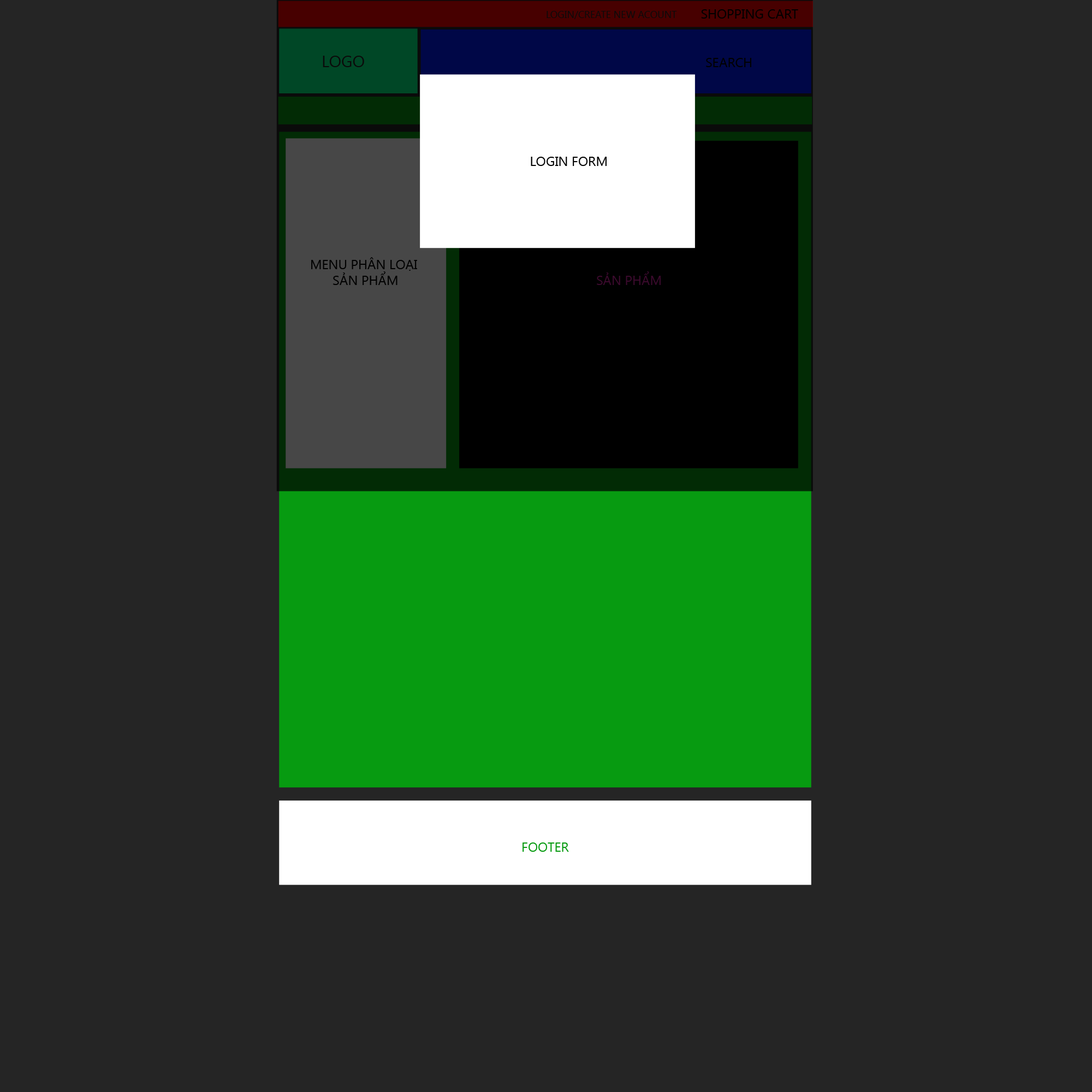
<style>
.page{position:relative;width:1092px;height:1092px;background:#252525}
.page>*{position:absolute;margin:0}
.t1{font:9.8px "SegoeUI";color:#0a0a0a;text-transform:uppercase}
.t2{font:13.1px "SegoeUI";color:#000000;text-transform:uppercase}
.t3{font:16.4px "SegoeUI";color:#0a0a0a;text-transform:uppercase}
.t4{font:13.1px "SegoeUI";color:#3b0a2d;text-transform:uppercase}
.t5{font:13.1px "SegoeUI";color:#079b11;text-transform:uppercase}
</style>
<div class="page">
<p class="t1" style="left:547px;top:11px;width:130px;height:8px">login/create new acount</p>
<p class="t2" style="left:701px;top:9px;width:97px;height:10px">shopping cart</p>
<p class="t3" style="left:323px;top:56px;width:41px;height:11px">Logo</p>
<p class="t2" style="left:706px;top:58px;width:45px;height:9px">search</p>
<p class="t2" style="left:531px;top:157px;width:76px;height:9px">login form</p>
<p class="t2" style="left:311px;top:257px;width:106px;height:28px;text-align:center">menu phân loại<br> sản phẩm</p>
<p class="t4" style="left:597px;top:271px;width:64px;height:14px">sản phẩm</p>
<p class="t5" style="left:523px;top:842px;width:46px;height:10px">Footer</p>
</div>
